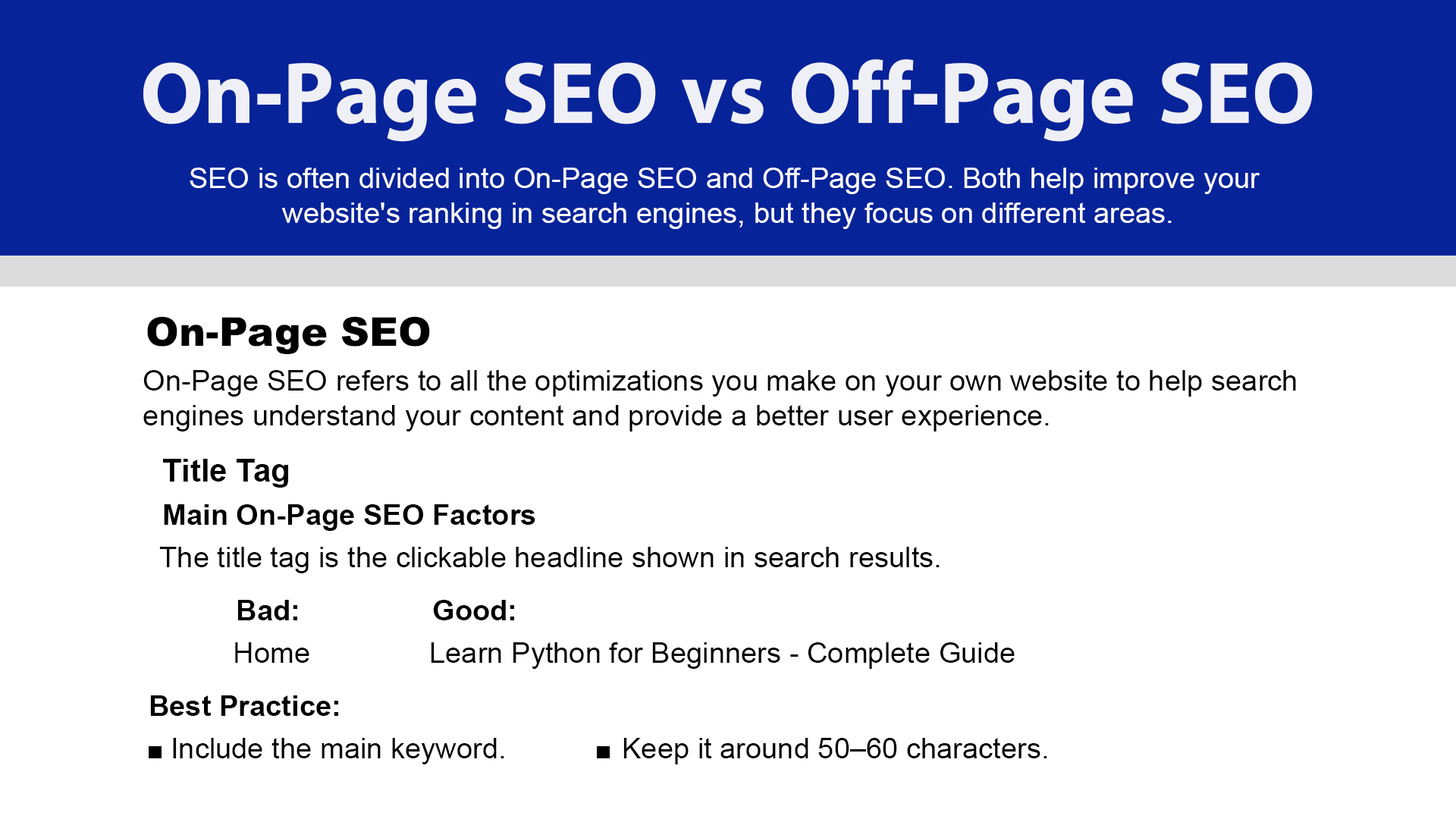
<style>
.page{position:relative;width:1456px;height:819px;background:#ffffff}
.page>*{position:absolute;margin:0}
.t1{font:88px "iKampuchea001_O'Chrov";color:#ffffff}
.t2{font:29px "ArialMT";color:#ffffff}
.t3{font:39.9px "Arial-Black";color:#000000}
.t4{font:29px "ArialMT";color:#000000}
.t5{font:31.8px "Arial-BoldMT";color:#000000}
.t6{font:28.9px "Arial-BoldMT";color:#000000}
</style>
<div class="page">
<p class="t1" style="left:143px;top:59px;width:1170px;height:83px;opacity:0.9">On-Page SEO vs Off-Page SEO</p>
<p class="t2" style="left:190px;top:168px;width:1070px;height:61px;text-align:center">SEO is often divided into On-Page SEO and Off-Page SEO. Both help improve your <br>website's ranking in search engines, but they focus on different areas.</p>
<p class="t3" style="left:147px;top:316px;width:283px;height:38px">On-Page SEO</p>
<p class="t4" style="left:143px;top:370px;width:1153px;height:61px">On-Page SEO refers to all the optimizations you make on your own website to help search <br>engines understand your content and provide a better user experience.</p>
<p class="t5" style="left:163px;top:459px;width:125px;height:29px">Title Tag</p>
<p class="t6" style="left:164px;top:504px;width:371px;height:27px">Main On-Page SEO Factors</p>
<p class="t4" style="left:159px;top:547px;width:781px;height:26px">The title tag is the clickable headline shown in search results.</p>
<p class="t6" style="left:237px;top:600px;width:60px;height:20px">Bad:</p>
<p class="t6" style="left:433px;top:600px;width:81px;height:20px">Good:</p>
<p class="t4" style="left:235px;top:642px;width:74px;height:21px">Home</p>
<p class="t4" style="left:431px;top:642px;width:584px;height:27px">Learn Python for Beginners - Complete Guide</p>
<p class="t6" style="left:150px;top:695px;width:188px;height:21px">Best Practice:</p>
<p class="t4" style="left:173px;top:738px;width:331px;height:26px">Include the main keyword.</p>
<p class="t4" style="left:623px;top:738px;width:424px;height:26px">Keep it around 50–60 characters.</p>
</div>
